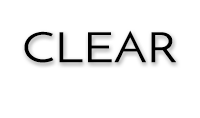
<style>
.page{position:relative;width:200px;height:118px;background:#ffffff}
.page>*{position:absolute;margin:0}
.t1{font:41.7px "JosefinSans";color:#000000;scale:1.21 1}
</style>
<div class="page">
<p class="t1" style="left:24px;top:30px;width:152px;height:33px">CLEAR</p>
</div>
